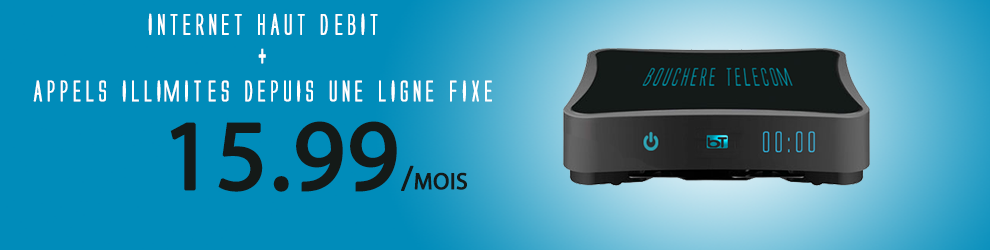
<style>
.page{position:relative;width:990px;height:250px;background:#008cba}
.page>*{position:absolute;margin:0}
.t1{font:45.8px/16.7px "AlienLeague";color:#ffffff;font-weight:bold}
.t2{font:45.8px/16.7px "AndersonTheSecretService";color:#ffffff;font-weight:bold}
.t3{font:50px/16.7px "AlienLeague";color:#ffffff;font-weight:bold}
.t4{font:100px "MyriadPro-Regular";color:#141a18;font-variant:small-caps;font-weight:bold}
.t5{font:33.3px "MyriadPro-Regular";color:#141a18;font-variant:small-caps;font-weight:bold}
</style>
<div class="page">
<p class="t1" style="left:33px;top:13px;width:459px;height:89px;text-align:center">INTERNET HAUT D<span class="t2">É</span>eBIT<br><span class="t3"><br>+<br><br></span>APPELS ILLIMIT<span class="t2">É</span>eS DEPUIS UNE LIGNE FIXE</p>
<p class="t4" style="left:170px;top:121px;width:297px;height:71px">15.99<span class="t5">/mois</span></p>
</div>
